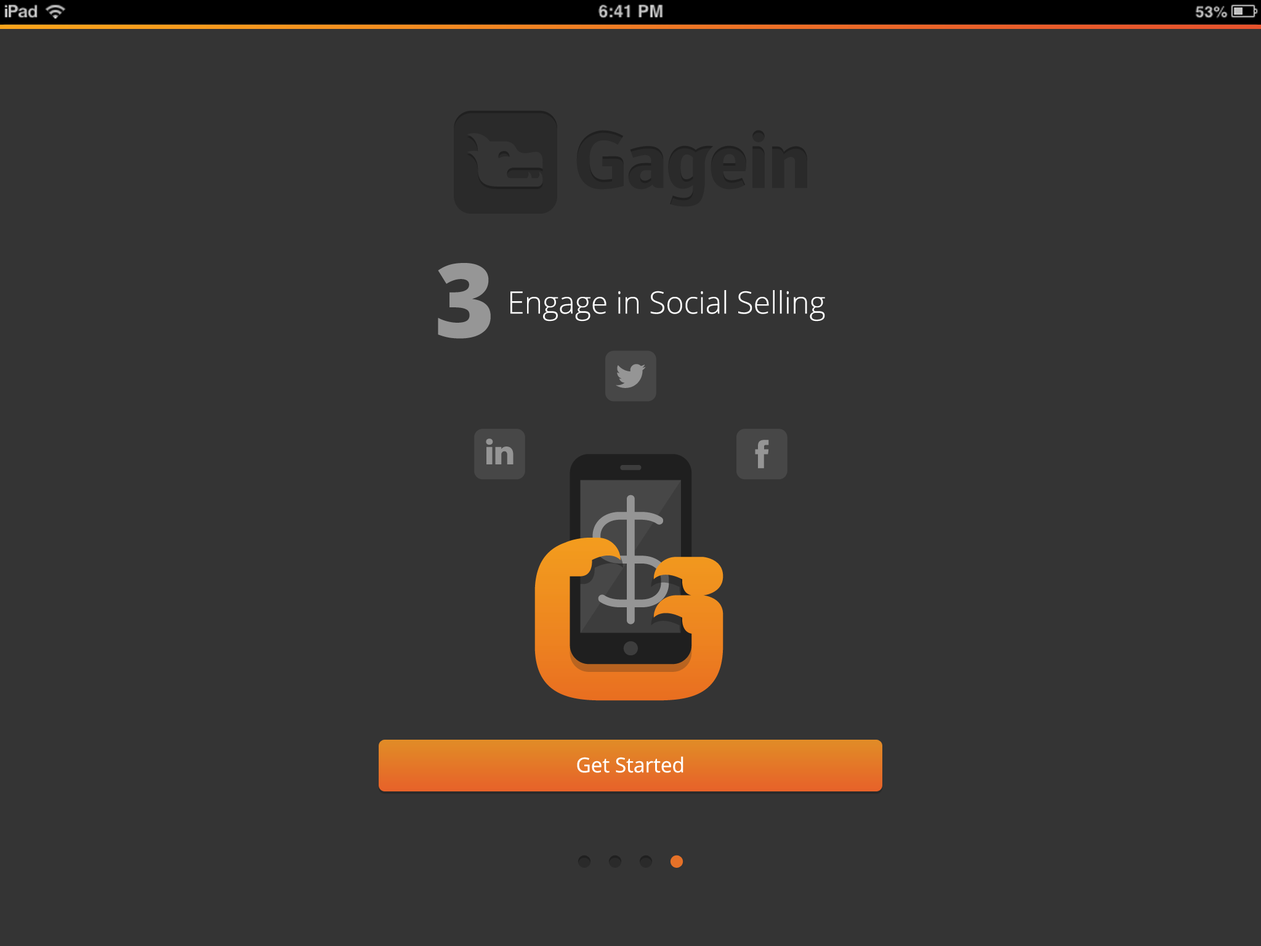
<style>
.page{position:relative;width:1261px;height:946px;background:#343434}
.page>*{position:absolute;margin:0}
.t1{font:102.6px "OpenSans-Extrabold";color:#969696}
.t2{font:30.8px "OpenSans-Light";color:#ffffff}
.t3{font:20.5px "OpenSans";color:#ffffff}
</style>
<div class="page">
<p class="t1" style="left:438px;top:263px;width:53px;height:76px">3</p>
<p class="t2" style="left:510px;top:290px;width:315px;height:31px">Engage in Social Selling</p>
<p class="t3" style="left:577px;top:756px;width:106px;height:17px">Get Started</p>
</div>
